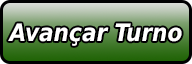
<style>
.page{position:relative;width:192px;height:64px}
.page>*{position:absolute;margin:0}
.t1{font:24px "DejaVuSansCondensed-BoldOblique";color:#ffffff}
</style>
<div class="page">
<p class="t1" style="left:8px;top:23px;width:174px;height:23px">Avançar Turno</p>
</div>
